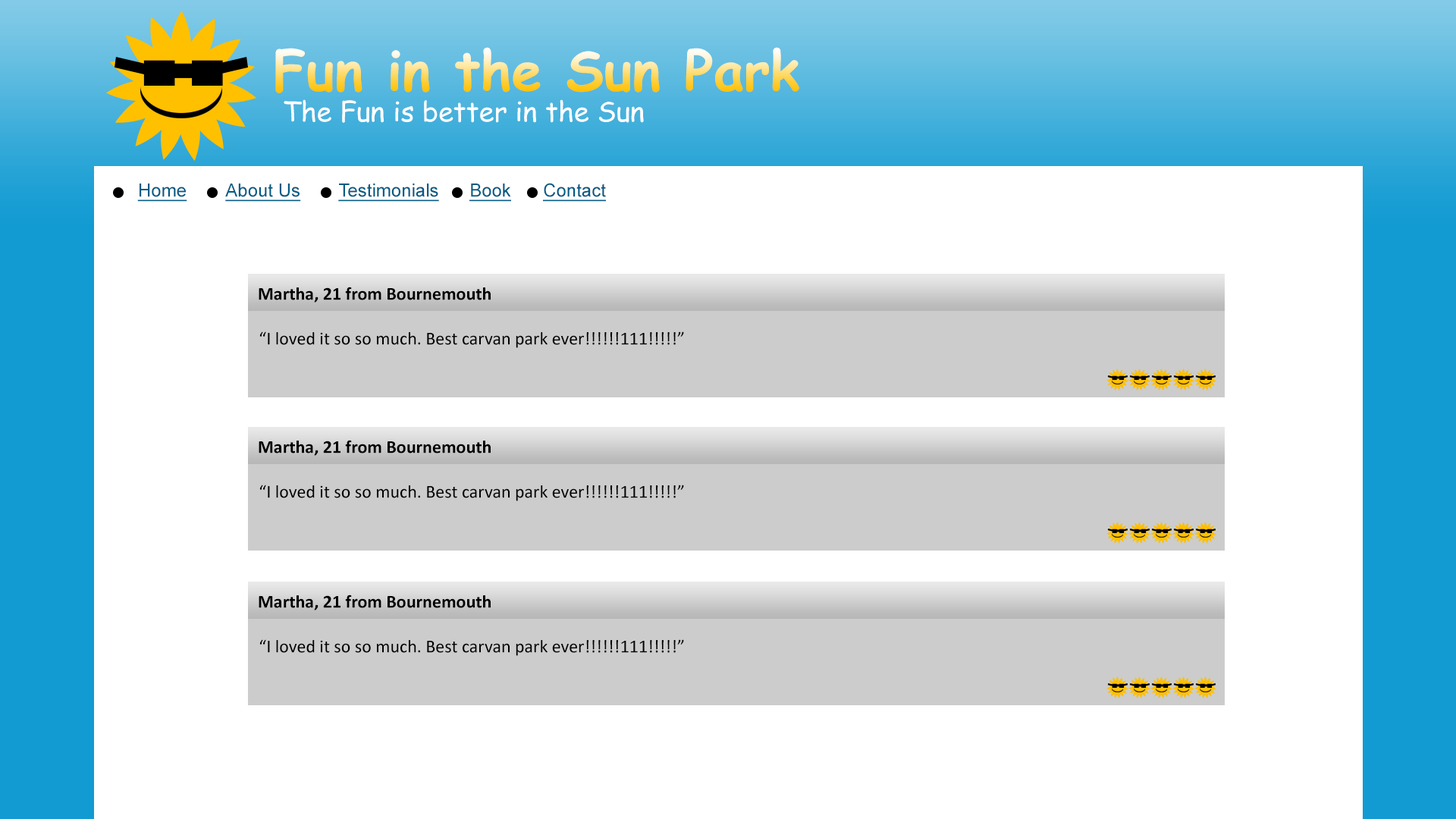
<style>
.page{position:relative;width:1456px;height:819px;background:#ffffff}
.page>*{position:absolute;margin:0}
.t1{font:54.6px "ComicSansMS-Bold"}
.t2{font:27.3px "ComicSansMS";color:#ffffff}
.t3{font:18.2px "ArialMT";color:#005b86;text-decoration:underline}
.t4{font:18.2px "Calibri-Bold";color:#000000}
.t5{font:18.2px "Calibri";color:#000000}
</style>
<div class="page">
<p class="t1" style="left:275px;top:47px;width:524px;height:46px">Fun in the Sun Park</p>
<p class="t2" style="left:284px;top:99px;width:360px;height:24px">The Fun is better in the Sun</p>
<p class="t3" style="left:137px;top:184px;width:50px;height:18px">Home</p>
<p class="t3" style="left:225px;top:184px;width:76px;height:18px">About Us</p>
<p class="t3" style="left:338px;top:184px;width:101px;height:18px">Testimonials</p>
<p class="t3" style="left:469px;top:184px;width:42px;height:18px">Book</p>
<p class="t3" style="left:543px;top:183px;width:63px;height:19px">Contact</p>
<p class="t4" style="left:259px;top:287px;width:232px;height:16px">Martha, 21 from Bournemouth</p>
<p class="t5" style="left:259px;top:331px;width:425px;height:17px">“I loved it so so much. Best carvan park ever!!!!!!111!!!!!”</p>
<p class="t4" style="left:259px;top:440px;width:232px;height:16px">Martha, 21 from Bournemouth</p>
<p class="t5" style="left:259px;top:485px;width:425px;height:16px">“I loved it so so much. Best carvan park ever!!!!!!111!!!!!”</p>
<p class="t4" style="left:259px;top:595px;width:232px;height:15px">Martha, 21 from Bournemouth</p>
<p class="t5" style="left:259px;top:639px;width:425px;height:17px">“I loved it so so much. Best carvan park ever!!!!!!111!!!!!”</p>
</div>
